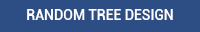
<style>
.page{position:relative;width:200px;height:32px;background:#2c4e85}
.page>*{position:absolute;margin:0}
.t1{font:14px "Roboto-Medium";color:#ffffff}
</style>
<div class="page">
<p class="t1" style="left:27px;top:9px;width:146px;height:11px">RANDOM TREE DESIGN</p>
</div>
